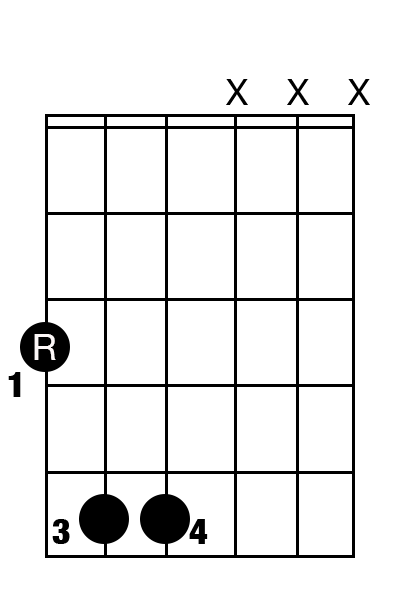
<style>
.page{position:relative;width:400px;height:600px;background:#ffffff}
.page>*{position:absolute;margin:0}
.t1{font:36px "HelveticaNeue";color:#000000}
.t2{font:36px "HelveticaNeue";color:#fdf8f8}
.t3{font:36px "HelveticaNeue-CondensedBlack";color:#000000}
</style>
<div class="page">
<p class="t1" style="left:226px;top:79px;width:22px;height:26px">X</p>
<p class="t1" style="left:287px;top:79px;width:22px;height:26px">X</p>
<p class="t1" style="left:348px;top:79px;width:22px;height:26px">X</p>
<p class="t2" style="left:34px;top:334px;width:22px;height:26px">R</p>
<p class="t3" style="left:8px;top:372px;width:13px;height:25px">1</p>
<p class="t3" style="left:52px;top:519px;width:18px;height:25px">3</p>
<p class="t3" style="left:189px;top:519px;width:19px;height:25px">4</p>
</div>
